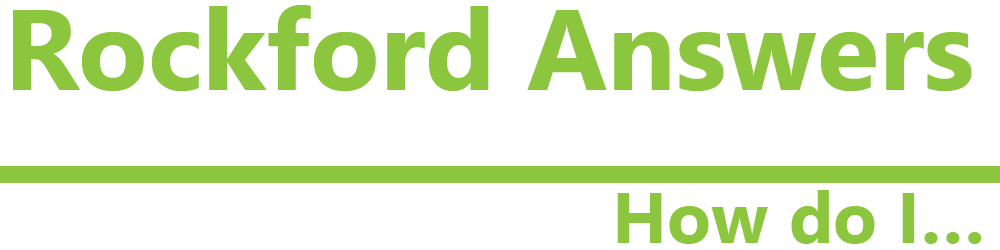
<style>
.page{position:relative;width:1000px;height:250px;background:#ffffff}
.page>*{position:absolute;margin:0}
.t1{font:114px "SegoeUI-Bold";color:#8cc63f}
.t2{font:72px "SegoeUI-Bold";color:#8cc63f}
</style>
<div class="page">
<p class="t1" style="left:13px;top:5px;width:959px;height:86px">Rockford Answers</p>
<p class="t2" style="left:617px;top:190px;width:365px;height:54px">How do I…</p>
</div>
